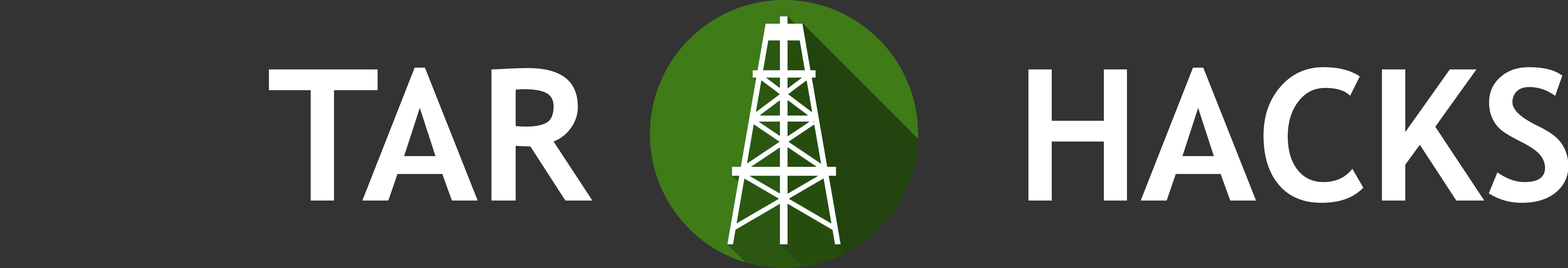
<style>
.page{position:relative;width:1568px;height:268px;background:#333333}
.page>*{position:absolute;margin:0}
.t1{font:183.3px "TrebuchetMS-Bold";color:#ffffff}
</style>
<div class="page">
<p class="t1" style="left:269px;top:68px;width:323px;height:133px">TAR</p>
<p class="t1" style="left:1028px;top:67px;width:540px;height:136px">HACKS</p>
</div>
